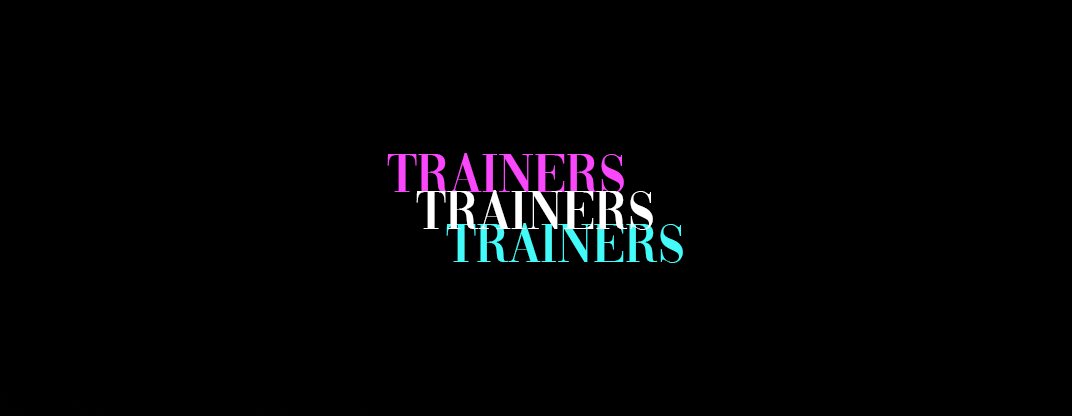
<style>
.page{position:relative;width:1072px;height:416px;background:#000000}
.page>*{position:absolute;margin:0}
.t1{font:57px "Vogue-Regular";color:#f948fb}
.t2{font:57px "Vogue-Regular";color:#ffffff}
.t3{font:57px "Vogue-Regular";color:#43fbf8}
</style>
<div class="page">
<p class="t1" style="left:387px;top:153px;width:237px;height:40px">TRAINERS</p>
<p class="t2" style="left:416px;top:190px;width:237px;height:40px">TRAINERS</p>
<p class="t3" style="left:446px;top:223px;width:237px;height:40px">TRAINERS</p>
</div>
